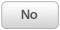
<style>
.page{position:relative;width:60px;height:30px}
.page>*{position:absolute;margin:0}
.t1{font:13px "Arial-BoldMT";letter-spacing:-0.025em;color:#555555}
</style>
<div class="page">
<p class="t1" style="left:21px;top:9px;width:17px;height:10px">No</p>
</div>
